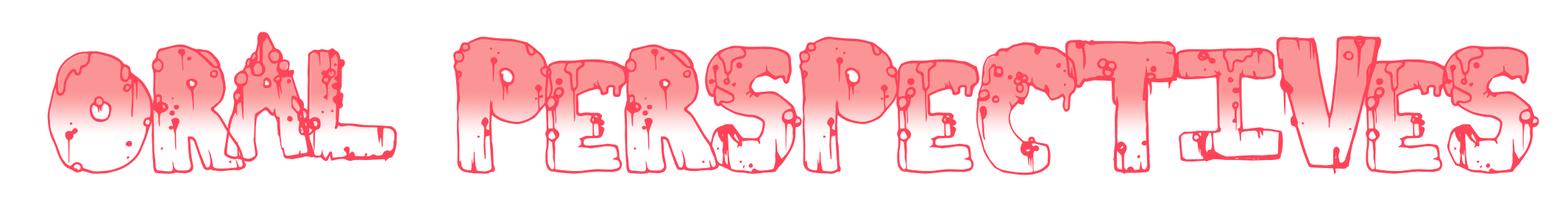
<style>
.page{position:relative;width:1568px;height:207px;background:#ffffff}
.page>*{position:absolute;margin:0}
.t1{font:248.3px "ToxicWaste";color:#ff445a}
</style>
<div class="page">
<p class="t1" style="left:47px;top:32px;width:1492px;height:144px">oral Perspectives</p>
</div>
